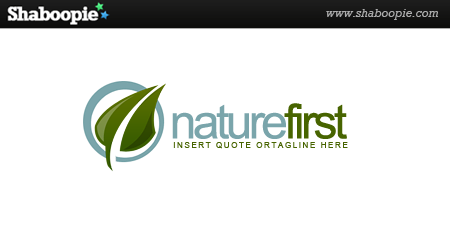
<style>
.page{position:relative;width:450px;height:250px;background:#ffffff}
.page>*{position:absolute;margin:0}
.t1{font:48px "ArialMT";letter-spacing:-0.075em;color:#7aa5ab}
.t2{font:48px "ArialMT";letter-spacing:-0.075em;color:#476400}
.t3{font:8px "ArialMT";letter-spacing:0.2em;color:#476400}
</style>
<div class="page">
<p class="t1" style="left:172px;top:103px;width:175px;height:36px">nature<span class="t2">first</span></p>
<p class="t3" style="left:173px;top:142px;width:175px;height:7px">INSERT QUOTE ORTAGLINE HERE</p>
</div>
